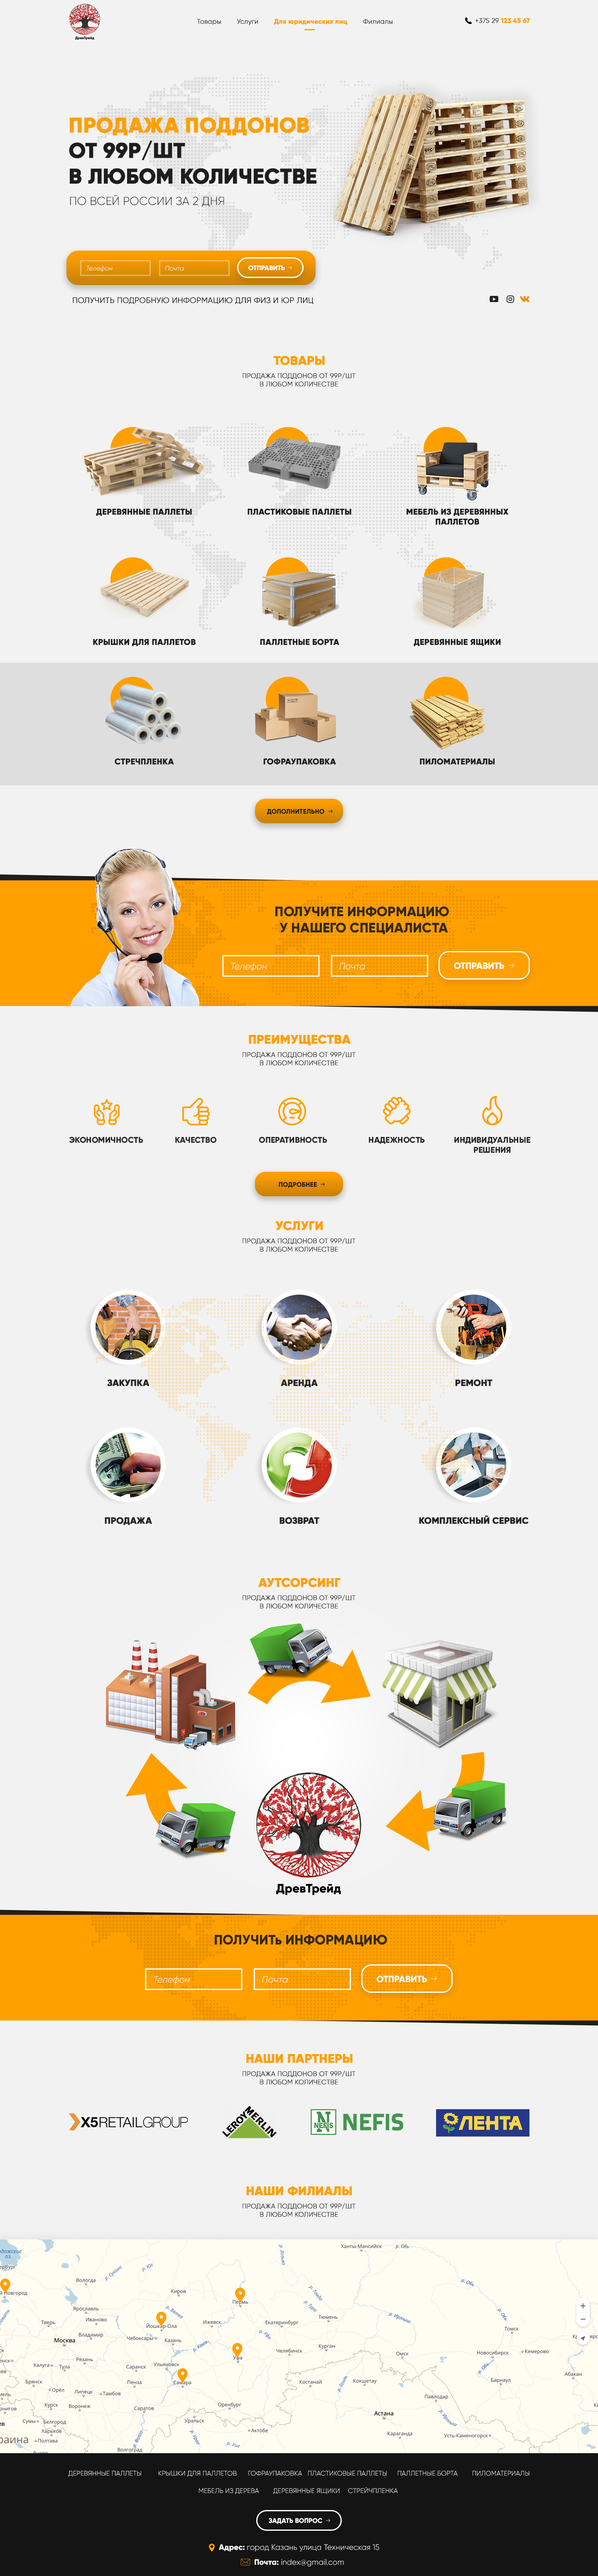
<style>
.page{position:relative;width:598px;height:2576px;background:#f2f2f2}
.page>*{position:absolute;margin:0}
.t1{font:6.6px "Gilroy-ExtraBold";color:#ffa000;font-weight:bold}
.t2{font:6.6px "Gilroy-Light";color:#1e1e1e;font-weight:bold}
.t3{font:21.2px "Gilroy-ExtraBold";color:#1e1e1e;font-weight:bold}
.t4{font:21.2px "Gilroy-ExtraBold";color:#ffa000;font-weight:bold}
.t5{font:11.6px "Gilroy-Light";color:#1e1e1e}
.t6{font:6.6px "Gilroy-Light";color:#ffffff;font-style:italic}
.t7{font:6.6px "Gilroy-ExtraBold";color:#ffffff}
.t8{font:7.9px "Gilroy-Light";color:#000000;font-weight:bold}
.t9{font:12.4px "Gilroy-ExtraBold";color:#ffa000;font-weight:bold}
.t10{font:8.3px "Gilroy-ExtraBold";color:#1e1e1e;font-weight:bold}
.t11{font:6.6px "Gilroy-ExtraBold";color:#1e1e1e}
.t12{font:13.7px "Gilroy-ExtraBold";color:#1e1e1e}
.t13{font:9.1px "Gilroy-Light";color:#ffffff;font-style:italic}
.t14{font:9.1px "Gilroy-ExtraBold";color:#ffffff}
.t15{font:8.3px "Gilroy-ExtraBold";color:#242424}
.t16{font:8.3px/10px "Gilroy-ExtraBold";color:#242424}
.t17{font:9.1px "Gilroy-ExtraBold";color:#242424;font-weight:bold}
.t18{font:6.6px/17.4px "Gilroy-Light";color:#ffffff}
.t19{font:7.9px "Gilroy-Light";color:#ffffff}
.t20{font:7.9px "Gilroy-ExtraBold";color:#ffffff}
</style>
<div class="page">
<p class="t1" style="left:475px;top:18px;width:54px;height:5px"><span class="t2">+375 29 </span>123 45 67</p>
<p class="t2" style="left:197px;top:19px;width:195px;height:6px">Товары        Услуги        <span class="t1">Для юридических лиц</span>        Филиалы</p>
<p class="t3" style="left:69px;top:117px;width:247px;height:67px"><span class="t4">ПРОДАЖА ПОДДОНОВ <br></span>ОТ 99Р/ШТ <br>В ЛЮБОМ КОЛИЧЕСТВЕ</p>
<p class="t5" style="left:70px;top:195px;width:154px;height:12px">ПО ВСЕЙ РОССИИ ЗА 2 ДНЯ</p>
<p class="t6" style="left:86px;top:266px;width:26px;height:6px">Телефон</p>
<p class="t6" style="left:165px;top:266px;width:19px;height:5px">Почта</p>
<p class="t7" style="left:248px;top:265px;width:37px;height:6px">ОТПРАВИТЬ</p>
<p class="t8" style="left:73px;top:297px;width:240px;height:7px">ПОЛУЧИТЬ ПОДРОБНУЮ ИНФОРМАЦИЮ ДЛЯ ФИЗ И ЮР ЛИЦ</p>
<p class="t9" style="left:273px;top:356px;width:51px;height:9px">ТОВАРЫ</p>
<p class="t2" style="left:242px;top:373px;width:113px;height:14px;text-align:center">ПРОДАЖА ПОДДОНОВ ОТ 99Р/ШТ <br>В ЛЮБОМ КОЛИЧЕСТВЕ</p>
<p class="t10" style="left:96px;top:509px;width:96px;height:7px">ДЕРЕВЯННЫЕ ПАЛЛЕТЫ</p>
<p class="t10" style="left:247px;top:508px;width:104px;height:7px">ПЛАСТИКОВЫЕ ПАЛЛЕТЫ</p>
<p class="t10" style="left:406px;top:508px;width:102px;height:17px;text-align:center">МЕБЕЛЬ ИЗ ДЕРЕВЯННЫХ<br>ПАЛЛЕТОВ</p>
<p class="t10" style="left:93px;top:639px;width:102px;height:7px">КРЫШКИ ДЛЯ ПАЛЛЕТОВ</p>
<p class="t10" style="left:260px;top:639px;width:79px;height:6px">ПАЛЛЕТНЫЕ БОРТА</p>
<p class="t10" style="left:413px;top:639px;width:87px;height:7px">ДЕРЕВЯННЫЕ ЯЩИКИ</p>
<p class="t10" style="left:115px;top:758px;width:59px;height:7px">СТРЕЧПЛЕНКА</p>
<p class="t10" style="left:263px;top:758px;width:73px;height:7px">ГОФРАУПАКОВКА</p>
<p class="t10" style="left:420px;top:758px;width:74px;height:7px">ПИЛОМАТЕРИАЛЫ</p>
<p class="t11" style="left:267px;top:809px;width:57px;height:6px">ДОПОЛНИТЕЛЬНО</p>
<p class="t12" style="left:275px;top:906px;width:174px;height:28px;text-align:center;opacity:0.95">ПОЛУЧИТЕ ИНФОРМАЦИЮ <br>У НАШЕГО СПЕЦИАЛИСТА</p>
<p class="t13" style="left:231px;top:963px;width:36px;height:8px">Телефон</p>
<p class="t13" style="left:339px;top:963px;width:26px;height:7px">Почта</p>
<p class="t14" style="left:454px;top:962px;width:50px;height:7px">ОТПРАВИТЬ</p>
<p class="t9" style="left:249px;top:1034px;width:102px;height:12px">ПРЕИМУЩЕСТВА</p>
<p class="t2" style="left:242px;top:1051px;width:113px;height:15px;text-align:center">ПРОДАЖА ПОДДОНОВ ОТ 99Р/ШТ <br>В ЛЮБОМ КОЛИЧЕСТВЕ</p>
<p class="t15" style="left:69px;top:1137px;width:74px;height:6px">ЭКОНОМИЧНОСТЬ</p>
<p class="t15" style="left:175px;top:1137px;width:42px;height:6px">КАЧЕСТВО</p>
<p class="t15" style="left:259px;top:1137px;width:68px;height:6px">ОПЕРАТИВНОСТЬ</p>
<p class="t15" style="left:368px;top:1137px;width:56px;height:7px">НАДЕЖНОСТЬ</p>
<p class="t16" style="left:454px;top:1137px;width:76px;height:16px;text-align:center">ИНДИВИДУАЛЬНЫЕ<br>РЕШЕНИЯ</p>
<p class="t11" style="left:278px;top:1182px;width:39px;height:6px">ПОДРОБНЕЕ</p>
<p class="t9" style="left:275px;top:1221px;width:48px;height:9px">УСЛУГИ</p>
<p class="t2" style="left:242px;top:1238px;width:113px;height:14px;text-align:center">ПРОДАЖА ПОДДОНОВ ОТ 99Р/ШТ <br>В ЛЮБОМ КОЛИЧЕСТВЕ</p>
<p class="t17" style="left:107px;top:1379px;width:42px;height:7px">ЗАКУПКА</p>
<p class="t17" style="left:281px;top:1379px;width:36px;height:9px">АРЕНДА</p>
<p class="t17" style="left:455px;top:1379px;width:37px;height:7px">РЕМОНТ</p>
<p class="t17" style="left:105px;top:1517px;width:47px;height:8px">ПРОДАЖА</p>
<p class="t17" style="left:279px;top:1517px;width:40px;height:7px">ВОЗВРАТ</p>
<p class="t17" style="left:419px;top:1515px;width:109px;height:9px">КОМПЛЕКСНЫЙ СЕРВИС</p>
<p class="t9" style="left:258px;top:1578px;width:82px;height:9px">АУТСОРСИНГ</p>
<p class="t2" style="left:242px;top:1595px;width:113px;height:14px;text-align:center">ПРОДАЖА ПОДДОНОВ ОТ 99Р/ШТ <br>В ЛЮБОМ КОЛИЧЕСТВЕ</p>
<p class="t12" style="left:215px;top:1934px;width:172px;height:13px;opacity:0.95">ПОЛУЧИТь ИНФОРМАЦИЮ</p>
<p class="t13" style="left:154px;top:1976px;width:36px;height:9px">Телефон</p>
<p class="t13" style="left:262px;top:1976px;width:26px;height:7px">Почта</p>
<p class="t14" style="left:376px;top:1976px;width:51px;height:7px">ОТПРАВИТЬ</p>
<p class="t9" style="left:246px;top:2054px;width:106px;height:9px">НАШИ ПАРТНЕРЫ</p>
<p class="t2" style="left:242px;top:2071px;width:113px;height:14px;text-align:center">ПРОДАЖА ПОДДОНОВ ОТ 99Р/ШТ <br>В ЛЮБОМ КОЛИЧЕСТВЕ</p>
<p class="t9" style="left:246px;top:2186px;width:106px;height:9px">НАШИ ФИЛИАЛЫ</p>
<p class="t2" style="left:242px;top:2203px;width:113px;height:14px;text-align:center">ПРОДАЖА ПОДДОНОВ ОТ 99Р/ШТ <br>В ЛЮБОМ КОЛИЧЕСТВЕ</p>
<p class="t18" style="left:68px;top:2471px;width:461px;height:23px;text-align:center">ДЕРЕВЯННЫЕ ПАЛЛЕТЫ  КРЫШКИ ДЛЯ ПАЛЛЕТОВ ГОФРАУПАКОВКА ПЛАСТИКОВЫЕ ПАЛЛЕТЫ ПАЛЛЕТНЫЕ БОРТА ПИЛОМАТЕРИАЛЫ<br>МЕБЕЛЬ ИЗ ДЕРЕВА ДЕРЕВЯННЫЕ ЯЩИКИ СТРЕЙЧПЛЕНКА</p>
<p class="t7" style="left:268px;top:2518px;width:54px;height:6px">ЗАДАТЬ ВОПРОС</p>
<p class="t19" style="left:219px;top:2544px;width:160px;height:8px"><span class="t20">Адрес: </span>город Казань улица Техническая 15</p>
<p class="t19" style="left:254px;top:2559px;width:90px;height:7px"><span class="t20">Почта: </span>index@gmail.com</p>
</div>
